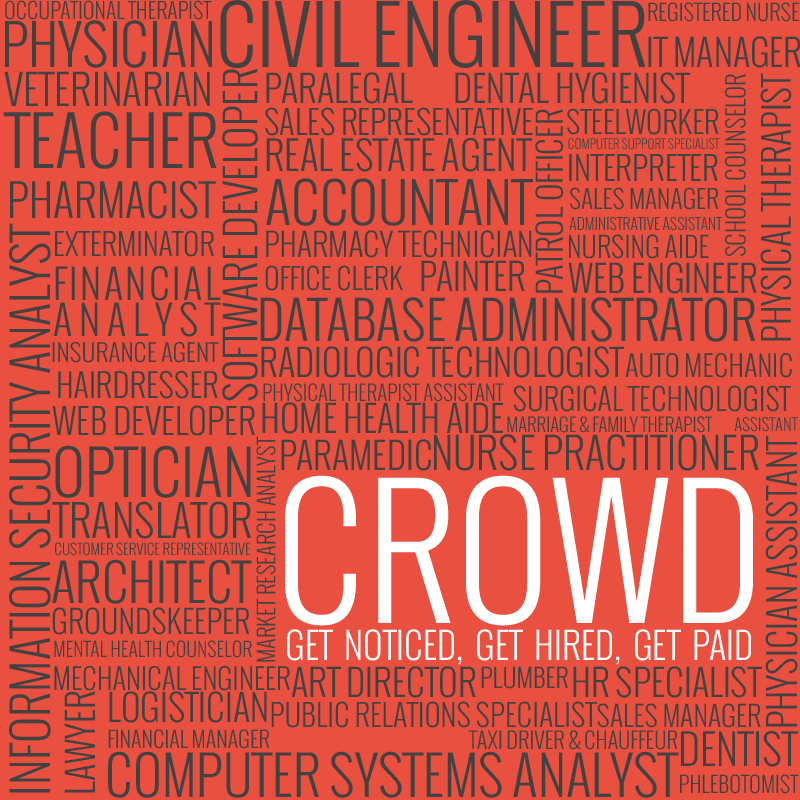
<style>
.page{position:relative;width:800px;height:800px;background:#e9503f}
.page>*{position:absolute;margin:0}
.t1{font:21.5px "Oswald-Light";color:#424242}
.t2{font:78.6px "Oswald-Light";color:#424242}
.t3{font:21.8px "Oswald-Light";color:#424242}
.t4{font:54.8px "Oswald-Light";color:#424242}
.t5{font:36px "Oswald-Light";color:#424242}
.t6{font:40.8px "Oswald-Light";color:#424242}
.t7{font:41.2px "Oswald-Light";color:#424242}
.t8{font:24px "Oswald-Light";color:#424242}
.t9{font:35.4px "Oswald-Light";color:#424242}
.t10{font:66.3px "Oswald-Light";color:#424242}
.t11{font:32.2px "Oswald-Light";color:#424242}
.t12{font:29.6px "Oswald-Light";color:#424242}
.t13{font:38.8px "Oswald-Light";color:#424242}
.t14{font:12.7px "Oswald-Light";color:#424242}
.t15{font:32.1px "Oswald-Light";color:#424242}
.t16{font:43.7px "Oswald-Light";color:#424242}
.t17{font:54.7px "Oswald-Light";color:#424242}
.t18{font:25.1px "Oswald-Light";color:#424242}
.t19{font:15.3px "Oswald-Light";color:#424242}
.t20{font:48.1px "Oswald-Light";color:#424242}
.t21{font:48.1px "Oswald-Light";color:#ffffff}
.t22{font:31.3px "Oswald-Light";color:#424242}
.t23{font:27.6px "Oswald-Light";color:#424242}
.t24{font:40px/36px "Oswald-Light";color:#424242}
.t25{font:28.6px "Oswald-Light";color:#424242}
.t26{font:51.3px "Oswald-Light";color:#424242}
.t27{font:23.5px "Oswald-Light";color:#424242;scale:1.06 1}
.t28{font:28.1px "Oswald-Light";color:#424242}
.t29{font:31.9px "Oswald-Light";color:#424242}
.t30{font:20.7px "Oswald-Light";color:#424242}
.t31{font:29.8px "Oswald-Light";color:#424242}
.t32{font:34.6px "Oswald-Light";color:#424242}
.t33{font:18.4px "Oswald-Light";color:#424242}
.t34{font:16.4px "Oswald-Light";color:#424242}
.t35{font:22.1px "Oswald-Light";color:#424242}
.t36{font:42px "Oswald-Light";color:#424242}
.t37{font:36.8px "Oswald-Light";color:#424242}
.t38{font:60.1px "Oswald-Light";color:#424242}
.t39{font:172.7px "Oswald-Light";color:#ffffff}
.t40{font:42.7px "Oswald-Light";color:#424242}
.t41{font:14.7px "Oswald-Light";color:#424242}
.t42{font:50.7px "Oswald-Light";color:#424242}
.t43{font:31.1px "Oswald-Light";color:#424242}
.t44{font:36px "Oswald-Light";color:#ffffff}
.t45{font:19.4px "Oswald-Light";color:#424242}
.t46{font:28.3px "Oswald-Light";color:#424242}
.t47{font:25.3px "Oswald-Light";color:#424242}
.t48{font:22px "Oswald-Light";color:#424242}
.t49{font:41.3px "Oswald-Light";color:#424242}
.t50{font:53.1px "Oswald-Light";color:#424242}
</style>
<div class="page">
<p class="t1" style="left:5px;top:0px;width:207px;height:20px">OCCUPATIONAL THERAPIST</p>
<p class="t2" style="left:220px;top:0px;width:426px;height:68px">CIVIL ENGINEER</p>
<p class="t3" style="left:648px;top:2px;width:151px;height:20px">REGISTERED NURSE</p>
<p class="t4" style="left:5px;top:20px;width:207px;height:48px">PHYSICIAN</p>
<p class="t5" style="left:648px;top:36px;width:153px;height:32px">IT MANAGER</p>
<p class="t6" style="left:4px;top:71px;width:206px;height:35px">VETERINARIAN</p>
<p class="t7" style="left:222px;top:69px;width:36px;height:332px;rotate:-90deg">SOFTWARE DEVELOPER</p>
<p class="t5" style="left:266px;top:72px;width:147px;height:32px">PARALEGAL</p>
<p class="t5" style="left:455px;top:72px;width:235px;height:32px">DENTAL HYGIENIST</p>
<p class="t8" style="left:725px;top:74px;width:21px;height:182px;rotate:-90deg">SCHOOL COUNSELOR</p>
<p class="t9" style="left:760px;top:73px;width:32px;height:268px;rotate:-90deg">PHYSICAL THERAPIST</p>
<p class="t10" style="left:3px;top:111px;width:214px;height:58px">TEACHER</p>
<p class="t11" style="left:265px;top:107px;width:268px;height:29px">SALES REPRESENTATIVE</p>
<p class="t11" style="left:535px;top:109px;width:29px;height:184px;rotate:-90deg">PATROL OFFICER</p>
<p class="t12" style="left:567px;top:108px;width:152px;height:27px">STEELWORKER</p>
<p class="t13" style="left:266px;top:138px;width:266px;height:34px">REAL ESTATE AGENT</p>
<p class="t14" style="left:568px;top:138px;width:152px;height:12px">COMPUTER SUPPORT SPECIALIST</p>
<p class="t15" style="left:569px;top:154px;width:149px;height:27px">INTERPRETER</p>
<p class="t16" style="left:10px;top:180px;width:206px;height:39px">PHARMACIST</p>
<p class="t17" style="left:266px;top:178px;width:267px;height:48px">ACCOUNTANT</p>
<p class="t18" style="left:570px;top:187px;width:149px;height:23px">SALES MANAGER</p>
<p class="t19" style="left:569px;top:217px;width:154px;height:14px">ADMINISTRATIVE ASSISTANT</p>
<p class="t20" style="left:9px;top:223px;width:42px;height:570px;rotate:-90deg"><span class="t21"><br></span>INFORMATION SECURITY ANALYST</p>
<p class="t12" style="left:55px;top:230px;width:159px;height:27px">EXTERMINATOR</p>
<p class="t22" style="left:266px;top:230px;width:266px;height:28px">PHARMACY TECHNICIAN</p>
<p class="t23" style="left:569px;top:234px;width:140px;height:25px">NURSING AIDE</p>
<p class="t24" style="left:54px;top:266px;width:167px;height:71px;text-align:justify">FINANCIAL<br>ANALYST</p>
<p class="t25" style="left:265px;top:265px;width:138px;height:26px">OFFICE CLERK</p>
<p class="t5" style="left:421px;top:260px;width:104px;height:31px">PAINTER</p>
<p class="t5" style="left:568px;top:262px;width:189px;height:32px">WEB ENGINEER</p>
<p class="t26" style="left:260px;top:297px;width:495px;height:45px">DATABASE ADMINISTRATOR</p>
<p class="t27" style="left:52px;top:342px;width:167px;height:21px">INSURANCE AGENT</p>
<p class="t5" style="left:261px;top:346px;width:363px;height:32px">RADIOLOGIC TECHNOLOGIST</p>
<p class="t28" style="left:625px;top:353px;width:167px;height:25px">AUTO MECHANIC</p>
<p class="t29" style="left:58px;top:370px;width:160px;height:29px">HAIRDRESSER</p>
<p class="t30" style="left:263px;top:383px;width:241px;height:19px">PHYSICAL THERAPIST ASSISTANT</p>
<p class="t31" style="left:513px;top:385px;width:278px;height:27px">SURGICAL TECHNOLOGIST</p>
<p class="t32" style="left:52px;top:405px;width:203px;height:31px">WEB DEVELOPER</p>
<p class="t5" style="left:262px;top:402px;width:241px;height:32px">HOME HEALTH AIDE</p>
<p class="t33" style="left:507px;top:416px;width:206px;height:17px">MARRIAGE &amp; FAMILY THERAPIST</p>
<p class="t34" style="left:734px;top:417px;width:64px;height:15px">ASSISTANT</p>
<p class="t35" style="left:256px;top:436px;width:20px;height:226px;rotate:-90deg">MARKET RESEARCH ANALYST</p>
<p class="t36" style="left:434px;top:434px;width:325px;height:37px">NURSE PRACTITIONER</p>
<p class="t37" style="left:765px;top:435px;width:33px;height:292px;rotate:-90deg">PHYSICIAN ASSISTANT</p>
<p class="t38" style="left:55px;top:445px;width:196px;height:53px">OPTICIAN</p>
<p class="t5" style="left:281px;top:439px;width:150px;height:32px">PARAMEDIC</p>
<p class="t39" style="left:285px;top:475px;width:468px;height:151px">CROWD</p>
<p class="t40" style="left:52px;top:501px;width:199px;height:38px">TRANSLATOR</p>
<p class="t41" style="left:55px;top:542px;width:196px;height:14px">CUSTOMER SERVICE REPRESENTATIVE</p>
<p class="t42" style="left:52px;top:559px;width:200px;height:45px">ARCHITECT</p>
<p class="t43" style="left:52px;top:607px;width:198px;height:28px">GROUNDSKEEPER</p>
<p class="t44" style="left:287px;top:629px;width:464px;height:36px">GET NOTICED, GET HIRED, GET PAID</p>
<p class="t45" style="left:54px;top:640px;width:198px;height:18px">MENTAL HEALTH COUNSELOR</p>
<p class="t46" style="left:54px;top:665px;width:236px;height:26px">MECHANICAL ENGINEER</p>
<p class="t5" style="left:292px;top:666px;width:184px;height:32px">ART DIRECTOR</p>
<p class="t47" style="left:481px;top:666px;width:87px;height:23px">PLUMBER</p>
<p class="t5" style="left:573px;top:666px;width:189px;height:32px">HR SPECIALIST</p>
<p class="t5" style="left:64px;top:691px;width:31px;height:102px;rotate:-90deg">LAWYER</p>
<p class="t5" style="left:109px;top:691px;width:158px;height:32px">LOGISTICIAN</p>
<p class="t31" style="left:271px;top:701px;width:326px;height:27px">PUBLIC RELATIONS SPECIALIST</p>
<p class="t23" style="left:597px;top:703px;width:164px;height:25px">SALES MANAGER</p>
<p class="t3" style="left:108px;top:729px;width:162px;height:20px">FINANCIAL MANAGER</p>
<p class="t48" style="left:468px;top:730px;width:210px;height:20px">TAXI DRIVER &amp; CHAUFFEUR</p>
<p class="t49" style="left:681px;top:730px;width:117px;height:37px">DENTIST</p>
<p class="t50" style="left:108px;top:751px;width:571px;height:47px">COMPUTER SYSTEMS ANALYST</p>
<p class="t3" style="left:680px;top:774px;width:119px;height:20px">PHLEBOTOMIST</p>
</div>
